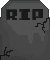
<style>
.page{position:relative;width:50px;height:60px;background:#525252}
.page>*{position:absolute;margin:0}
.t1{font:16.7px "I-pixel-u";color:#1a1a1a}
</style>
<div class="page">
<p class="t1" style="left:6px;top:9px;width:37px;height:11px">RIP</p>
</div>
